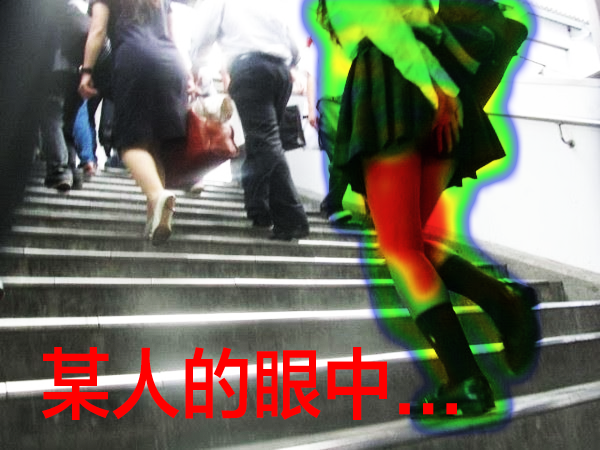
<style>
.page{position:relative;width:600px;height:450px}
.page>*{position:absolute;margin:0}
.t1{font:77.4px "FZLTZHK--GBK1-0";color:#ff0000;scale:0.91 1}
</style>
<div class="page">
<p class="t1" style="left:42px;top:347px;width:415px;height:73px">某人的眼中...</p>
</div>
